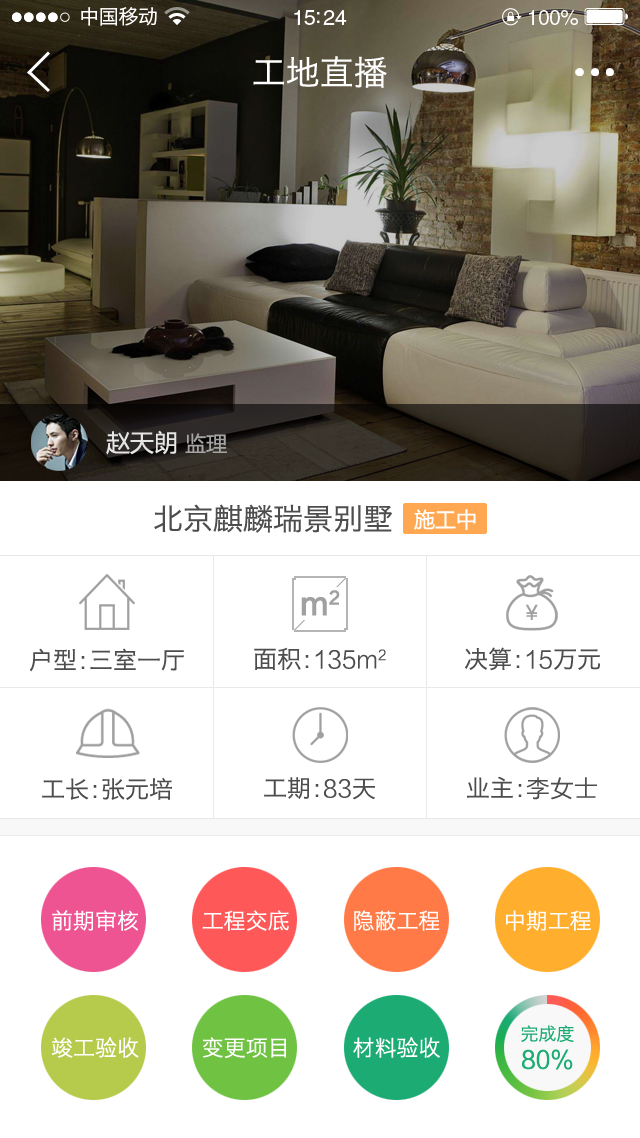
<style>
.page{position:relative;width:640px;height:1138px;background:#ffffff}
.page>*{position:absolute;margin:0}
.t1{font:20px "HiraginoSansGB-W3";letter-spacing:-0.02em;color:#ffffff}
.t2{font:21.5px "HelveticaLTStd-Roman";letter-spacing:-0.02em;color:#ffffff}
.t3{font:20.6px "HelveticaLTStd-Roman";letter-spacing:-0.02em;color:#ffffff}
.t4{font:34px "HiraginoSansGB-W3";color:#ffffff}
.t5{font:24px "MicrosoftYaHei";color:#e5e5e5}
.t6{font:21px "MicrosoftYaHei";color:#a4a4a4}
.t7{font:30px "HiraginoSansGB-W3";color:#4d4d4d}
.t8{font:21px "MicrosoftYaHei";color:#ffffff}
.t9{font:24px "HiraginoSansGB-W3";color:#4d4d4d}
.t10{font:24px "FZLTXHK";color:#4d4d4d}
.t11{font:22px "HiraginoSansGB-W3";color:#ffffff}
.t12{font:18px "HiraginoSansGB-W3";color:#1cab73}
.t13{font:24px "FZLTHJW--GB1-0";color:#1cab73}
</style>
<div class="page">
<p class="t1" style="left:81px;top:7px;width:76px;height:19px">中国移动</p>
<p class="t2" style="left:294px;top:10px;width:53px;height:15px">15:24</p>
<p class="t3" style="left:529px;top:10px;width:49px;height:15px">100%</p>
<p class="t4" style="left:253px;top:56px;width:134px;height:32px">工地直播</p>
<p class="t5" style="left:106px;top:430px;width:121px;height:25px">赵天朗 <span class="t6">监理</span></p>
<p class="t7" style="left:154px;top:504px;width:238px;height:29px">北京麒麟瑞景别墅</p>
<p class="t8" style="left:414px;top:509px;width:62px;height:21px">施工中</p>
<p class="t9" style="left:29px;top:648px;width:155px;height:24px">户型:三室一厅</p>
<p class="t10" style="left:254px;top:647px;width:132px;height:23px"><span class="t9">面积:</span>135m2</p>
<p class="t9" style="left:465px;top:647px;width:135px;height:24px">决算:<span class="t10">15</span>万元</p>
<p class="t9" style="left:42px;top:778px;width:130px;height:22px">工长:张元培</p>
<p class="t9" style="left:264px;top:777px;width:111px;height:23px">工期:<span class="t10">83天</span></p>
<p class="t9" style="left:467px;top:776px;width:130px;height:24px">业主:<span class="t10">李女士</span></p>
<p class="t11" style="left:52px;top:910px;width:539px;height:21px">前期审核      工程交底     隐蔽工程      中期工程</p>
<p class="t12" style="left:521px;top:1025px;width:53px;height:17px">完成度</p>
<p class="t11" style="left:51px;top:1037px;width:389px;height:21px">竣工验收      变更项目     材料验收</p>
<p class="t13" style="left:522px;top:1049px;width:51px;height:21px">80%</p>
</div>
